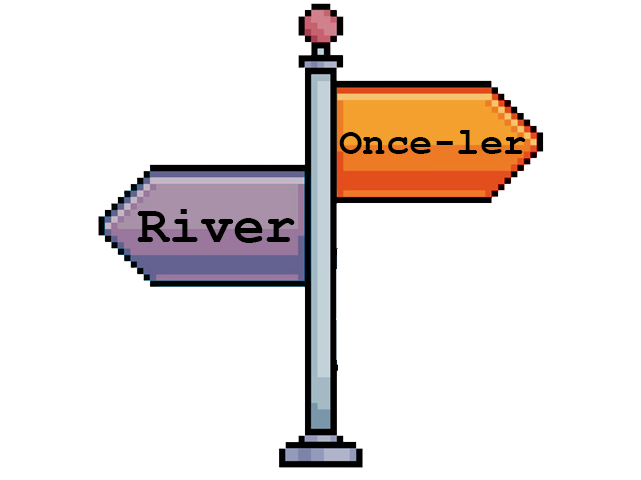
<style>
.page{position:relative;width:641px;height:480px;background:#ffffff}
.page>*{position:absolute;margin:0}
.t1{font:39.2px "CourierNewPS-BoldMT";color:#000000}
.t2{font:52.9px "CourierNewPS-BoldMT";color:#000000}
</style>
<div class="page">
<p class="t1" style="left:339px;top:130px;width:187px;height:24px">Once-ler</p>
<p class="t2" style="left:137px;top:209px;width:158px;height:34px">River</p>
</div>
